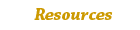
<style>
.page{position:relative;width:140px;height:30px;background:#ffffff}
.page>*{position:absolute;margin:0}
.t1{font:18px "ChaparralPro-BoldIt";color:#cc9900}
</style>
<div class="page">
<p class="t1" style="left:34px;top:8px;width:79px;height:12px">Resources</p>
</div>
